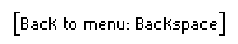
<style>
.page{position:relative;width:238px;height:44px;background:#ffffff}
.page>*{position:absolute;margin:0}
.t1{font:24px "Pixelade";color:#000000}
</style>
<div class="page">
<p class="t1" style="left:14px;top:12px;width:211px;height:24px">[Back to menu: Backspace]</p>
</div>
